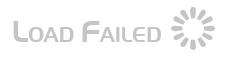
<style>
.page{position:relative;width:228px;height:57px;background:#ffffff}
.page>*{position:absolute;margin:0}
.t1{font:21px "Slicker";color:#c5c5c5}
.t2{font:30px "Slicker";color:#c5c5c5}
</style>
<div class="page">
<p class="t1" style="left:13px;top:21px;width:148px;height:21px"><span class="t2">L</span>OAD <span class="t2">F</span>AILED</p>
</div>
